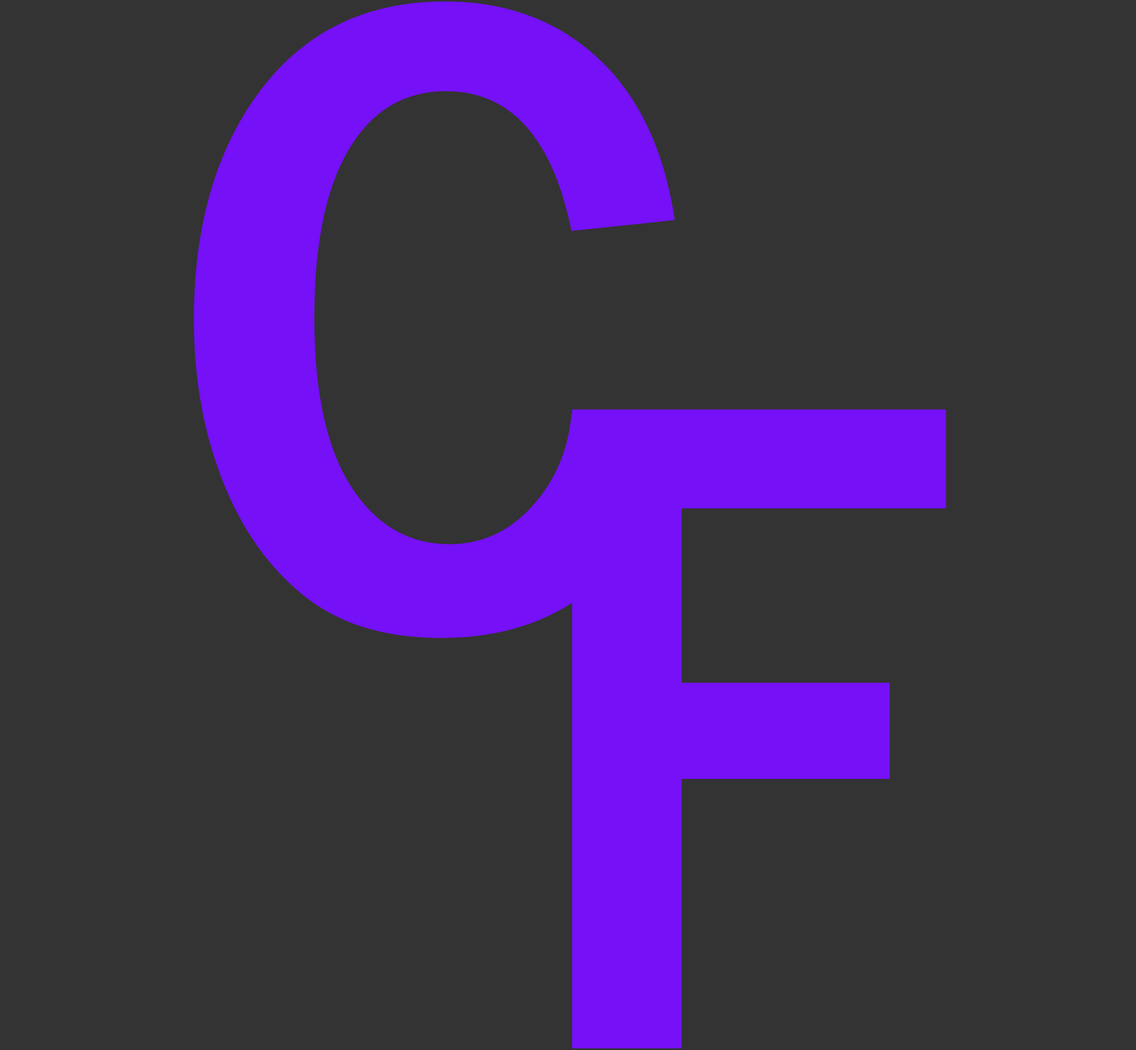
<style>
.page{position:relative;width:1136px;height:1050px;background:#333333}
.page>*{position:absolute;margin:0}
.t1{font:925.9px "FranklinGothic-Medium";letter-spacing:0.125em;color:#7510f7;text-transform:uppercase}
.t2{font:957.9px "FranklinGothic-Medium";letter-spacing:0.125em;color:#7510f7;text-transform:uppercase;scale:0.93 1}
</style>
<div class="page">
<p class="t1" style="left:194px;top:1px;width:481px;height:637px">C</p>
<p class="t2" style="left:572px;top:409px;width:374px;height:639px">F</p>
</div>
